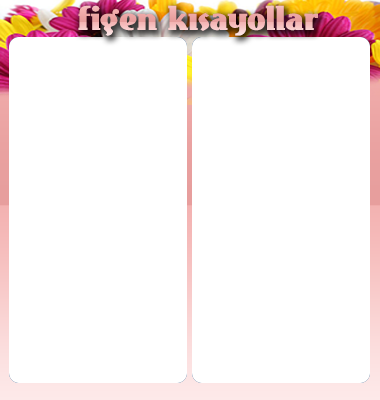
<style>
.page{position:relative;width:380px;height:400px;background:#ffffff}
.page>*{position:absolute;margin:0}
.t1{font:33.3px "EastMarket";color:#f3b1b0}
</style>
<div class="page">
<p class="t1" style="left:78px;top:5px;width:240px;height:31px">figen kısayollar</p>
</div>
